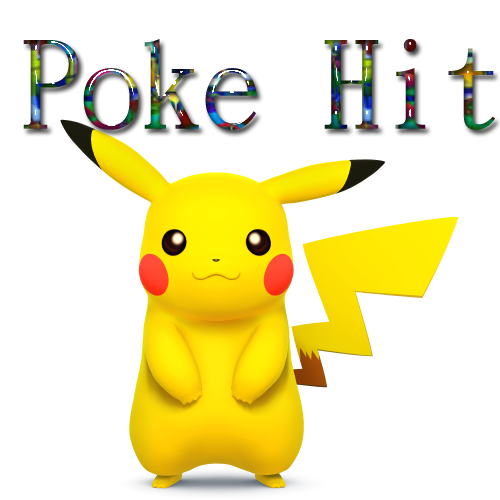
<style>
.page{position:relative;width:500px;height:500px;background:#ffffff}
.page>*{position:absolute;margin:0}
.t1{font:120px "DFKaiShu-SB-Estd-BF"}
</style>
<div class="page">
<p class="t1" style="left:23px;top:39px;width:472px;height:91px">Poke Hit</p>
</div>
